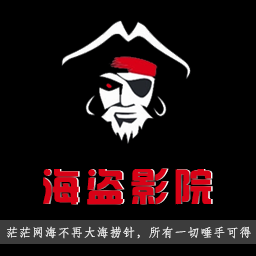
<style>
.page{position:relative;width:256px;height:256px;background:#000000}
.page>*{position:absolute;margin:0}
.t1{font:38px "hzgb";letter-spacing:0.15em;color:#d90116}
.t2{font:12px "STFangsong";letter-spacing:0.08em;color:#ffffff}
</style>
<div class="page">
<p class="t1" style="left:43px;top:168px;width:169px;height:37px">海盗影院</p>
<p class="t1" style="left:44px;top:168px;width:169px;height:37px">海盗影院</p>
<p class="t2" style="left:7px;top:226px;width:244px;height:13px">茫茫网海不再大海捞针，所有一切唾手可得</p>
</div>
